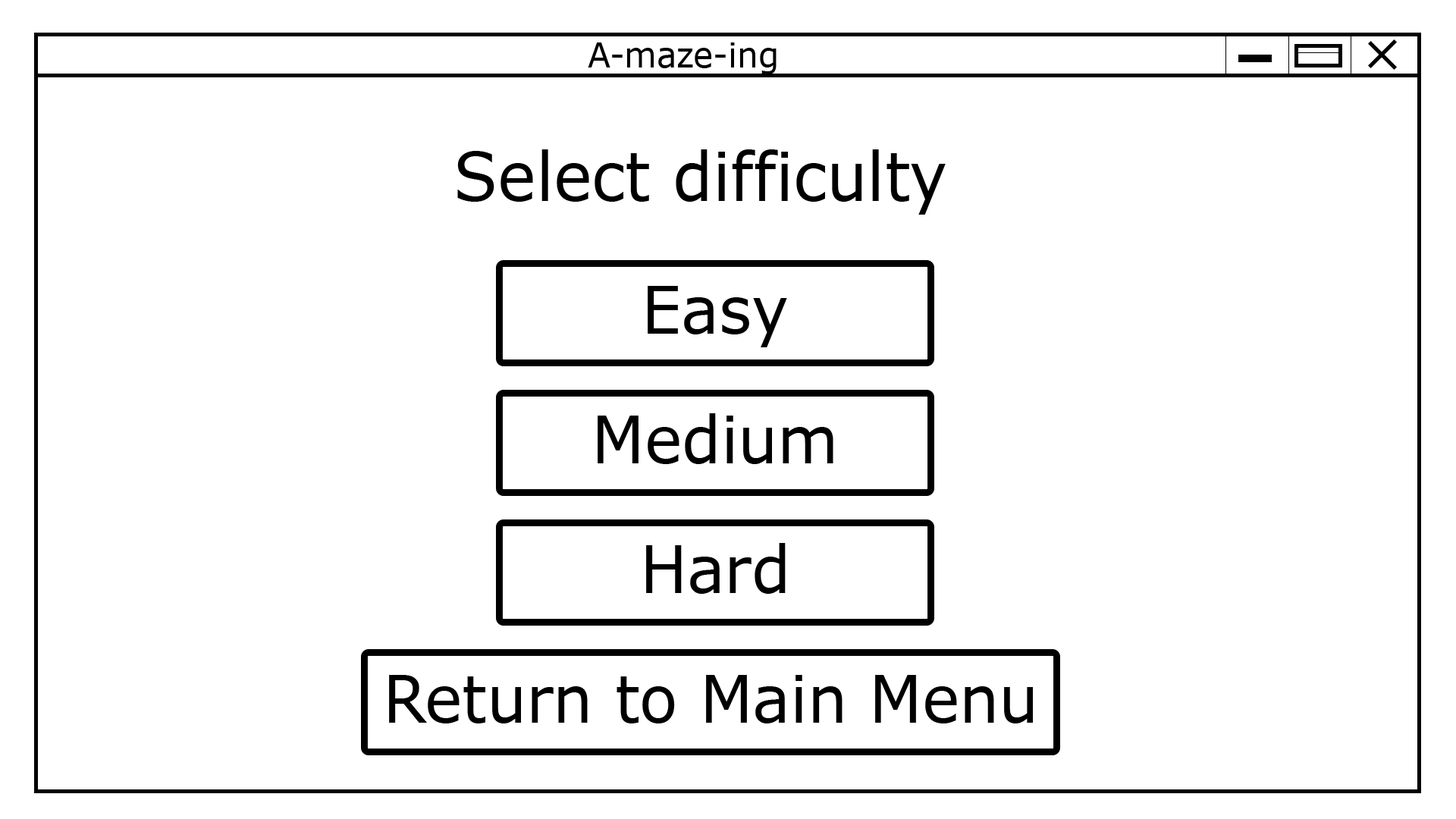
<style>
.page{position:relative;width:1456px;height:819px;background:#ffffff}
.page>*{position:absolute;margin:0}
.t1{font:34.7px "Verdana";color:#000000;scale:0.95 1}
.t2{font:67.5px "Verdana";color:#000000;scale:0.95 1}
.t3{font:66px "Verdana";color:#000000;scale:0.95 1}
</style>
<div class="page">
<p class="t1" style="left:588px;top:42px;width:189px;height:32px">A-maze-ing</p>
<p class="t2" style="left:457px;top:149px;width:489px;height:66px">Select difficulty</p>
<p class="t3" style="left:648px;top:286px;width:139px;height:61px">Easy</p>
<p class="t3" style="left:598px;top:413px;width:235px;height:51px">Medium</p>
<p class="t3" style="left:646px;top:543px;width:140px;height:51px">Hard</p>
<p class="t3" style="left:389px;top:675px;width:644px;height:48px">Return to Main Menu</p>
</div>
